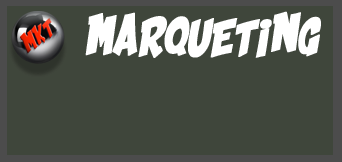
<style>
.page{position:relative;width:342px;height:162px;background:#3f463b}
.page>*{position:absolute;margin:0}
.t1{font:48px "ShakaPow";color:#ffffff;font-weight:bold}
</style>
<div class="page">
<p class="t1" style="left:85px;top:11px;width:236px;height:47px">Marqueting</p>
</div>
